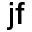
<style>
.page{position:relative;width:32px;height:32px;background:#ffffff}
.page>*{position:absolute;margin:0}
.t1{font:30px "HelveticaNeueLTPro-Md";color:#000000}
</style>
<div class="page">
<p class="t1" style="left:7px;top:2px;width:18px;height:28px">jf</p>
</div>
